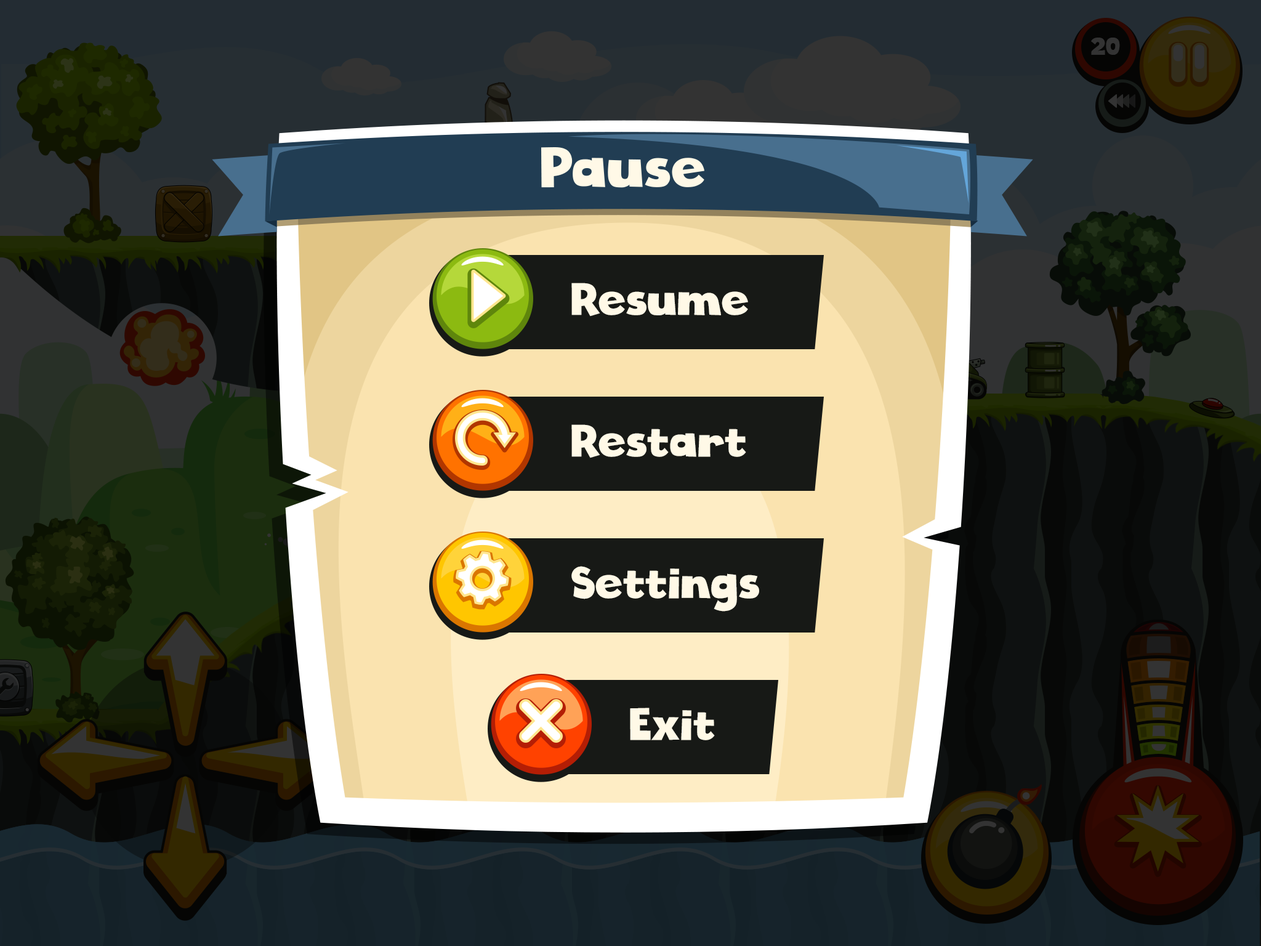
<style>
.page{position:relative;width:1261px;height:946px}
.page>*{position:absolute;margin:0}
.t1{font:44.3px "CloudyWithaChanceofLove";letter-spacing:-0.025em;color:#fff9e7}
</style>
<div class="page">
<p class="t1" style="left:571px;top:283px;width:177px;height:33px">Resume</p>
<p class="t1" style="left:571px;top:424px;width:175px;height:34px">Restart</p>
<p class="t1" style="left:571px;top:566px;width:188px;height:45px">Settings</p>
<p class="t1" style="left:630px;top:707px;width:85px;height:33px">Exit</p>
</div>
